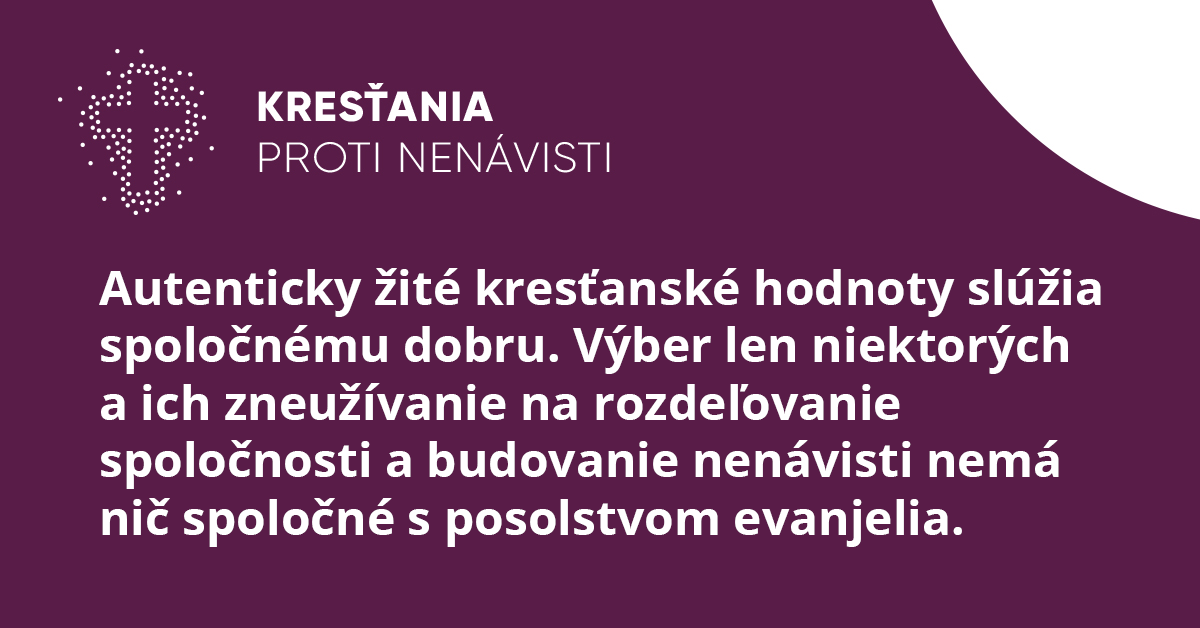
<style>
.page{position:relative;width:1200px;height:628px;background:#591c48}
.page>*{position:absolute;margin:0}
.t1{font:48px "OpenSans-Bold";color:#ffffff}
</style>
<div class="page">
<p class="t1" style="left:99px;top:268px;width:1002px;height:279px">Autenticky žité kresťanské hodnoty slúžia spoločnému dobru. Výber len niektorých a ich zneužívanie na rozdeľovanie spoločnosti a budovanie nenávisti nemá nič spoločné s posolstvom evanjelia.</p>
</div>
